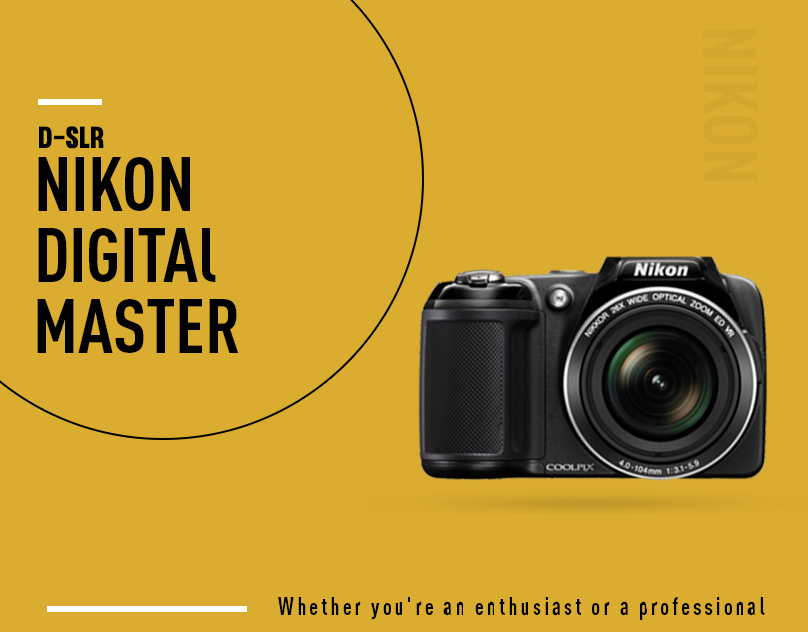
<style>
.page{position:relative;width:808px;height:632px;background:#daac2f}
.page>*{position:absolute;margin:0}
.t1{font:75px "DINPro-CondensedBold";color:#d3a62d}
.t2{font:30px "Muro-Regular";color:#000000}
.t3{font:75px "DINPro-CondensedBold";color:#000000}
.t4{font:24.9px "DINPro-CondensedBold";letter-spacing:0.14em;color:#000000;scale:0.88 1}
</style>
<div class="page">
<p class="t1" style="left:703px;top:29px;width:55px;height:152px;rotate:90deg">NIKON</p>
<p class="t2" style="left:39px;top:126px;width:65px;height:23px">D-SLR</p>
<p class="t3" style="left:38px;top:157px;width:152px;height:54px">NIKON</p>
<p class="t3" style="left:38px;top:228px;width:178px;height:54px">DIGITAl</p>
<p class="t3" style="left:37px;top:299px;width:202px;height:54px">MASTER</p>
<p class="t4" style="left:278px;top:597px;width:487px;height:23px">Whether you're an enthusiast or a professional</p>
</div>
